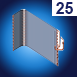
<style>
.page{position:relative;width:77px;height:77px}
.page>*{position:absolute;margin:0}
.t1{font:16px "Arial-BoldMT";color:#182163}
</style>
<div class="page">
<p class="t1" style="left:56px;top:2px;width:17px;height:12px">25</p>
</div>
